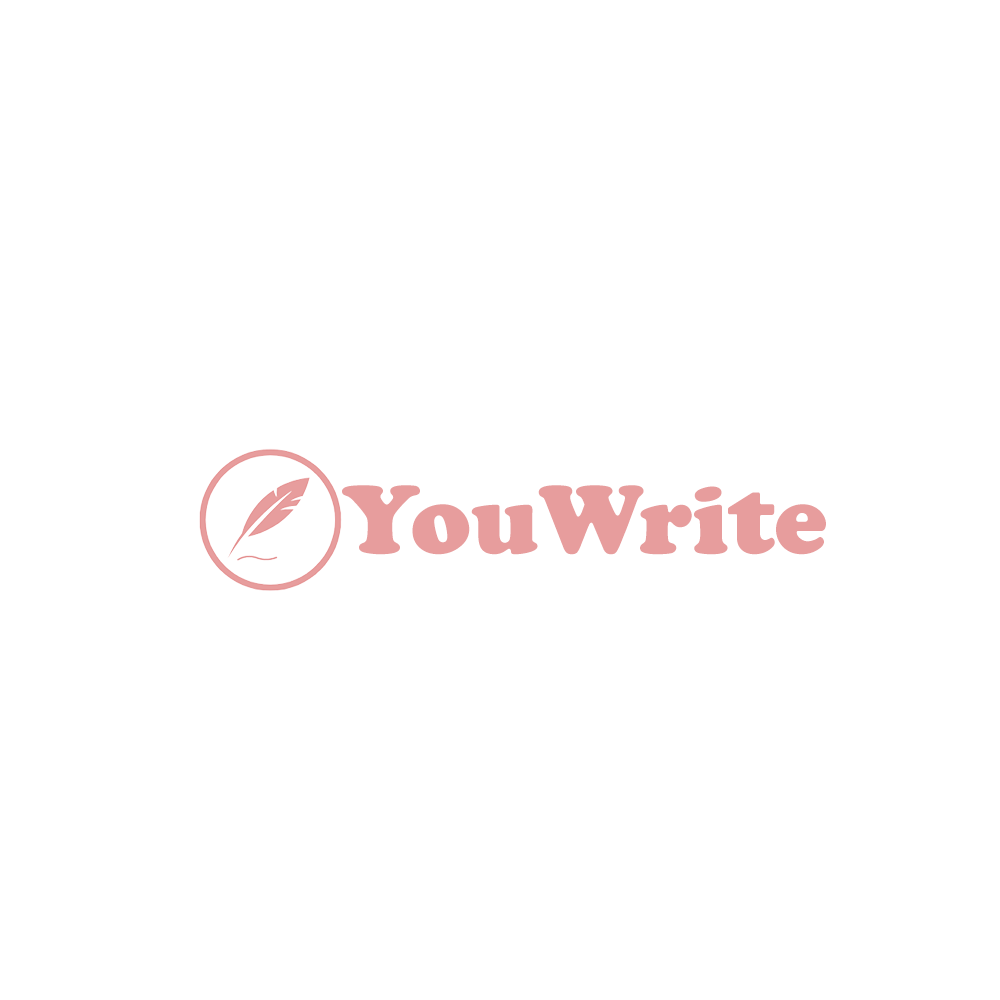
<style>
.page{position:relative;width:1000px;height:1000px;background:#ffffff}
.page>*{position:absolute;margin:0}
.t1{font:100px "CooperBlack";color:#e79d9d}
</style>
<div class="page">
<p class="t1" style="left:342px;top:485px;width:484px;height:70px">YouWrite</p>
</div>
